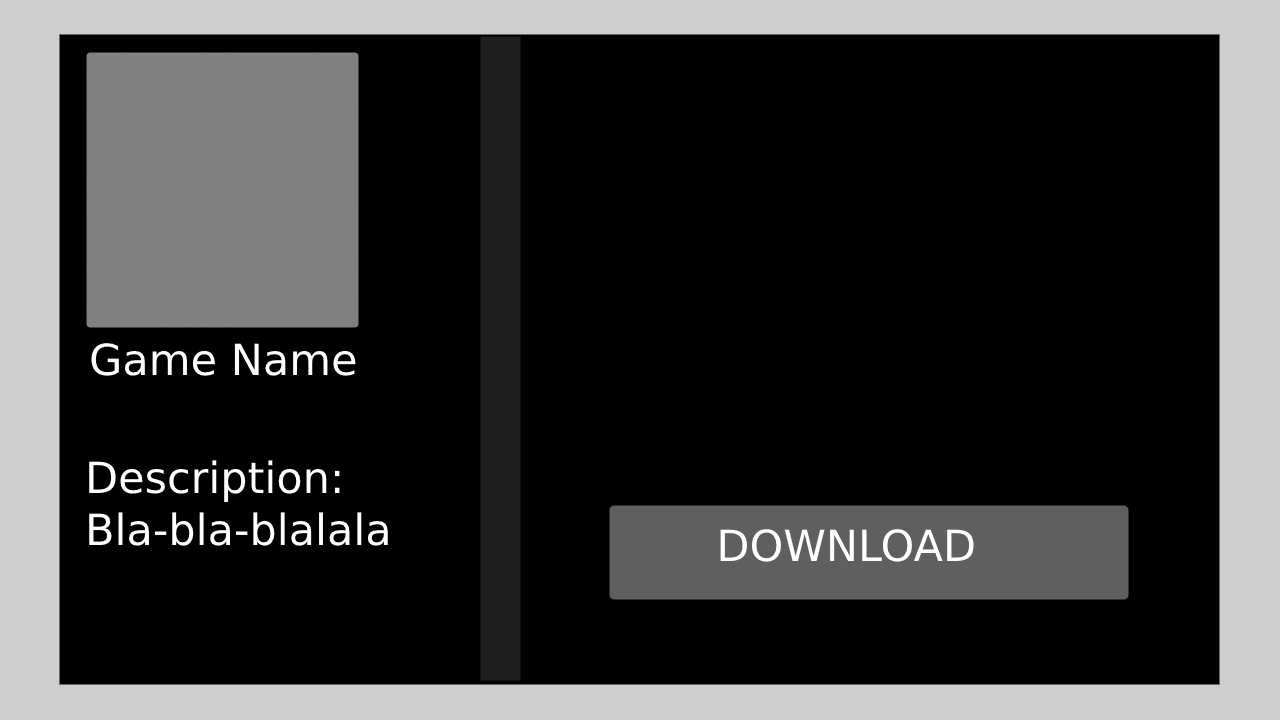
<style>
.page{position:relative;width:1280px;height:720px;background:#000000}
.page>*{position:absolute;margin:0}
.t1{font:43px "DejaVuSans";color:#ffffff}
</style>
<div class="page">
<p class="t1" style="left:91px;top:343px;width:265px;height:33px">Game Name</p>
<p class="t1" style="left:89px;top:460px;width:299px;height:86px">Description:<br>Bla-bla-blalala</p>
<p class="t1" style="left:720px;top:529px;width:254px;height:33px">DOWNLOAD</p>
</div>
